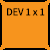
<style>
.page{position:relative;width:50px;height:50px;background:#f7941d}
.page>*{position:absolute;margin:0}
.t1{font:10.4px "SourceSansPro-Regular";color:#000000}
</style>
<div class="page">
<p class="t1" style="left:7px;top:8px;width:38px;height:8px">DEV 1 x 1</p>
</div>
